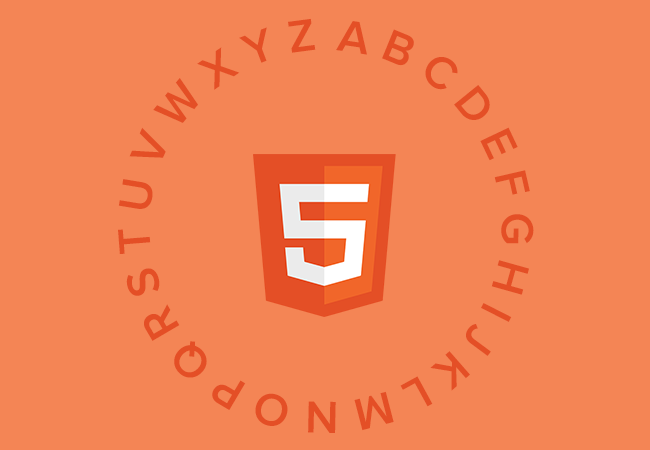
<style>
.page{position:relative;width:650px;height:450px;background:#f48555}
.page>*{position:absolute;margin:0}
.t1{font:46.7px "ProximaNova-Semibold";color:#e44f26}
</style>
<div class="page">
<p class="t1" style="left:118px;top:18px;width:416px;height:415px;rotate:-19deg">A B C D E F G H I J K L M N O P Q R S T U V W X Y Z</p>
</div>
